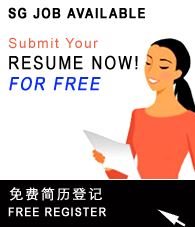
<style>
.page{position:relative;width:195px;height:227px;background:#ffffff}
.page>*{position:absolute;margin:0}
.t1{font:14px "ArialNarrow-Bold";letter-spacing:0.1em;color:#000000;font-weight:bold}
.t2{font:14px/18px "ArialMT";letter-spacing:0.1em;color:#f16043}
.t3{font:18px/18px "ArialNarrow";letter-spacing:0.1em;color:#000000;font-weight:bold}
.t4{font:18px "ArialNarrow";letter-spacing:0.1em;color:#082bff;font-weight:bold;font-style:italic}
.t5{font:14px "STXihei";letter-spacing:0.1em;color:#ffffff;font-weight:bold}
.t6{font:12px "ArialNarrow";letter-spacing:0.1em;color:#ffffff;font-weight:bold}
</style>
<div class="page">
<p class="t1" style="left:8px;top:7px;width:137px;height:12px">SG JOB AVAILABLE</p>
<p class="t2" style="left:8px;top:37px;width:130px;height:33px">Submit Your<br><span class="t3">RESUME NOW!</span></p>
<p class="t4" style="left:9px;top:77px;width:92px;height:14px">FOR FREE</p>
<p class="t5" style="left:9px;top:187px;width:93px;height:14px">免费简历登记</p>
<p class="t6" style="left:8px;top:207px;width:98px;height:10px">FREE REGISTER</p>
</div>
